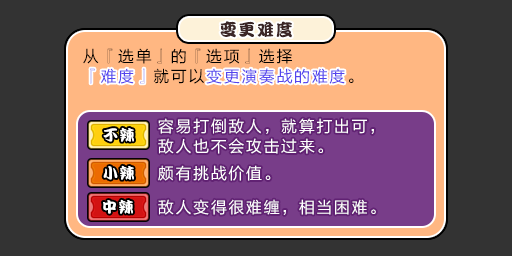
<style>
.page{position:relative;width:512px;height:256px;background:#333333}
.page>*{position:absolute;margin:0}
.t1{font:17px "DFPKanTingLiuW9";letter-spacing:0.1em;color:#3b2626}
.t2{font:16px/20px "FZLTHJW--GB1-0";letter-spacing:0.1em;color:#000000}
.t3{font:16px/20px "FZLTHJW--GB1-0";letter-spacing:0.1em;color:#5444ed}
.t4{font:16px "FZLTHJW--GB1-0";letter-spacing:0.1em;color:#5444ed}
.t5{font:16px/20px "FZLTHJW--GB1-0";letter-spacing:0.1em;color:#ffffff}
.t6{font:15px "DFPKanTingLiuW9";letter-spacing:0.1em;color:#ffffff}
.t7{font:16px "FZLTHJW--GB1-0";letter-spacing:0.1em;color:#ffffff}
</style>
<div class="page">
<p class="t1" style="left:220px;top:21px;width:72px;height:17px">变更难度</p>
<p class="t2" style="left:83px;top:48px;width:271px;height:36px">从『选单』的『选项』选择<br><span class="t3">『难度』</span>就可以<span class="t3">变更演奏战的难度</span>。</p>
<p class="t4" style="left:90px;top:68px;width:255px;height:16px">『难度』　　　变更演奏战的难度</p>
<p class="t5" style="left:158px;top:118px;width:216px;height:36px">容易打倒敌人，就算打出可，<br>敌人也不会攻击过来。</p>
<p class="t6" style="left:103px;top:127px;width:31px;height:15px">不辣</p>
<p class="t6" style="left:103px;top:165px;width:31px;height:15px">小辣</p>
<p class="t7" style="left:158px;top:165px;width:113px;height:16px">颇有挑战价值。</p>
<p class="t6" style="left:103px;top:199px;width:30px;height:15px">中辣</p>
<p class="t7" style="left:158px;top:199px;width:218px;height:16px">敌人变得很难缠，相当困难。</p>
</div>
